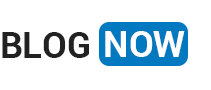
<style>
.page{position:relative;width:211px;height:90px;background:#ffffff}
.page>*{position:absolute;margin:0}
.t1{font:36px "Roboto-Bold";color:#222222}
.t2{font:36px "Roboto-Bold";color:#ffffff}
</style>
<div class="page">
<p class="t1" style="left:2px;top:32px;width:87px;height:26px">BLOG</p>
<p class="t2" style="left:105px;top:31px;width:80px;height:26px">NOW</p>
</div>
